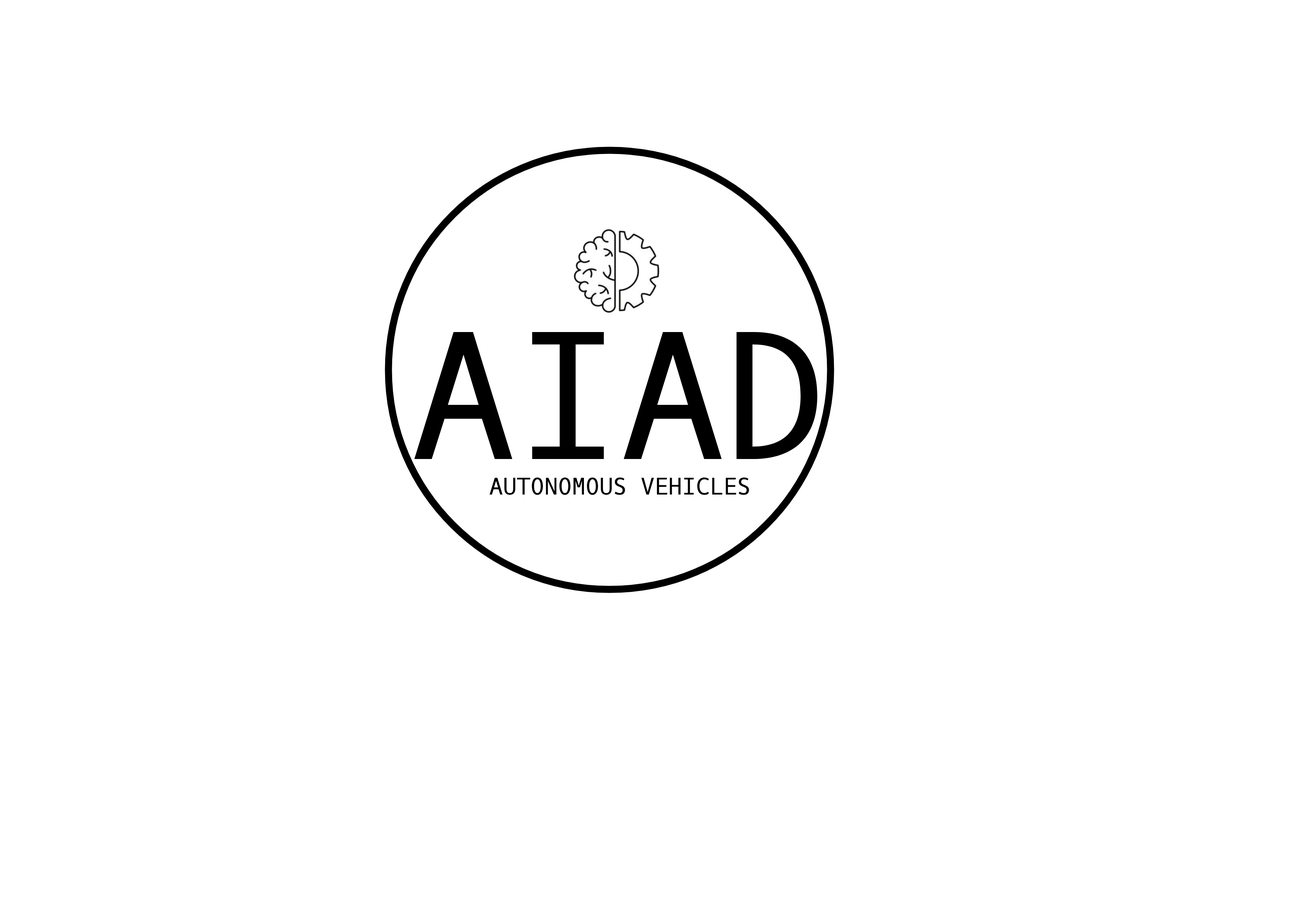
<style>
.page{position:relative;width:1299px;height:918px;background:#ffffff}
.page>*{position:absolute;margin:0}
.t1{font:174.4px "OxygenMono-Regular";color:#000000}
.t2{font:23px "OxygenMono-Regular";color:#000000}
</style>
<div class="page">
<p class="t1" style="left:414px;top:332px;width:403px;height:127px">AIAD</p>
<p class="t2" style="left:489px;top:478px;width:260px;height:17px">AUTONOMOUS VEHICLES</p>
</div>
